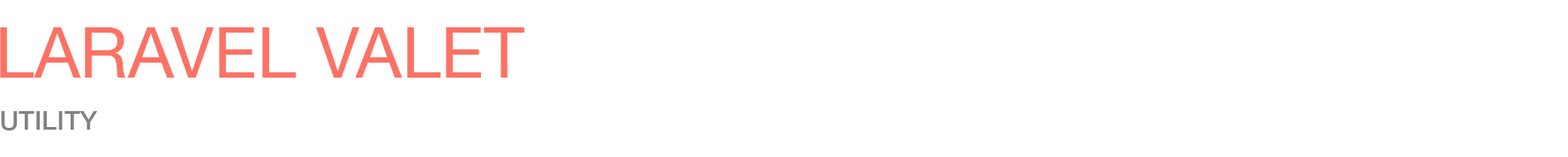
<style>
.page{position:relative;width:1568px;height:157px;background:#ffffff}
.page>*{position:absolute;margin:0}
.t1{font:70.6px "HelveticaNeue";color:#fc7265;text-transform:uppercase}
.t2{font:26.5px "HelveticaNeue-Medium";color:#818181;text-transform:uppercase}
</style>
<div class="page">
<p class="t1" style="left:0px;top:27px;width:524px;height:51px">Laravel Valet</p>
<p class="t2" style="left:1px;top:111px;width:97px;height:20px">utility</p>
<p class="t2" style="left:1px;top:111px;width:97px;height:20px">utility</p>
<p class="t2" style="left:1px;top:111px;width:97px;height:20px">utility</p>
<p class="t2" style="left:1px;top:111px;width:97px;height:20px">UTILITY</p>
<p class="t2" style="left:1px;top:111px;width:97px;height:20px">UTILITY</p>
<p class="t2" style="left:1px;top:111px;width:97px;height:20px">utility</p>
<p class="t2" style="left:1px;top:111px;width:97px;height:20px">utility</p>
<p class="t2" style="left:1px;top:111px;width:97px;height:20px">utility</p>
<p class="t2" style="left:1px;top:111px;width:97px;height:20px">utility</p>
<p class="t2" style="left:1px;top:111px;width:97px;height:20px">utility</p>
<p class="t2" style="left:1px;top:111px;width:97px;height:20px">utility</p>
<p class="t2" style="left:1px;top:111px;width:97px;height:20px">utility</p>
<p class="t2" style="left:1px;top:111px;width:97px;height:20px">utility</p>
<p class="t2" style="left:1px;top:111px;width:97px;height:20px">utility</p>
</div>
